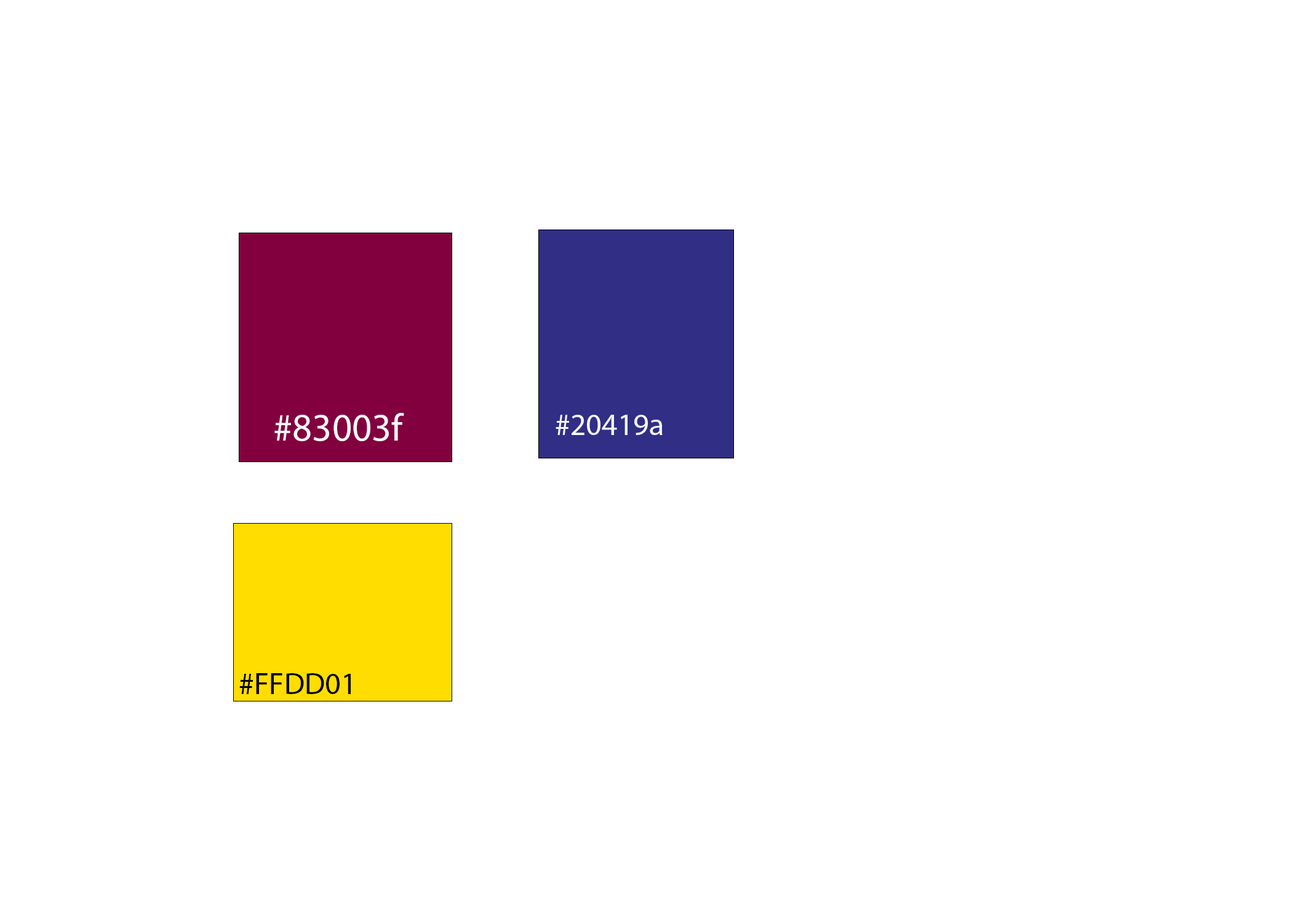
<style>
.page{position:relative;width:1292px;height:923px;background:#ffffff}
.page>*{position:absolute;margin:0}
.t1{font:38.5px "MyriadPro-Regular";color:#faf8f9}
.t2{font:30.8px "MyriadPro-Regular";color:#f6f6fc}
.t3{font:30.8px "MyriadPro-Regular";color:#020200}
</style>
<div class="page">
<p class="t1" style="left:274px;top:413px;width:130px;height:28px">#83003f</p>
<p class="t2" style="left:556px;top:415px;width:107px;height:20px">#20419a</p>
<p class="t3" style="left:239px;top:673px;width:112px;height:21px">#FFDD01</p>
</div>
